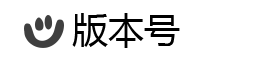
<style>
.page{position:relative;width:260px;height:60px;background:#ffffff}
.page>*{position:absolute;margin:0}
.t1{font:36px "MicrosoftYaHei";color:#000000}
</style>
<div class="page">
<p class="t1" style="left:72px;top:13px;width:108px;height:35px">版本号</p>
</div>
